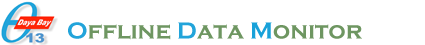
<style>
.page{position:relative;width:425px;height:45px;background:#ffffff}
.page>*{position:absolute;margin:0}
.t1{font:24px "CopperplateGothic-Bold";color:#6e9661}
.t2{font:24px "CopperplateGothic-Bold";color:#22a4da}
.t3{font:24px "CopperplateGothic-Bold";color:#18a1d9}
</style>
<div class="page">
<p class="t1" style="left:68px;top:22px;width:294px;height:18px"><span class="t2">O</span>ffline <span class="t2">D</span>ata <span class="t3">M</span>onitor</p>
</div>
